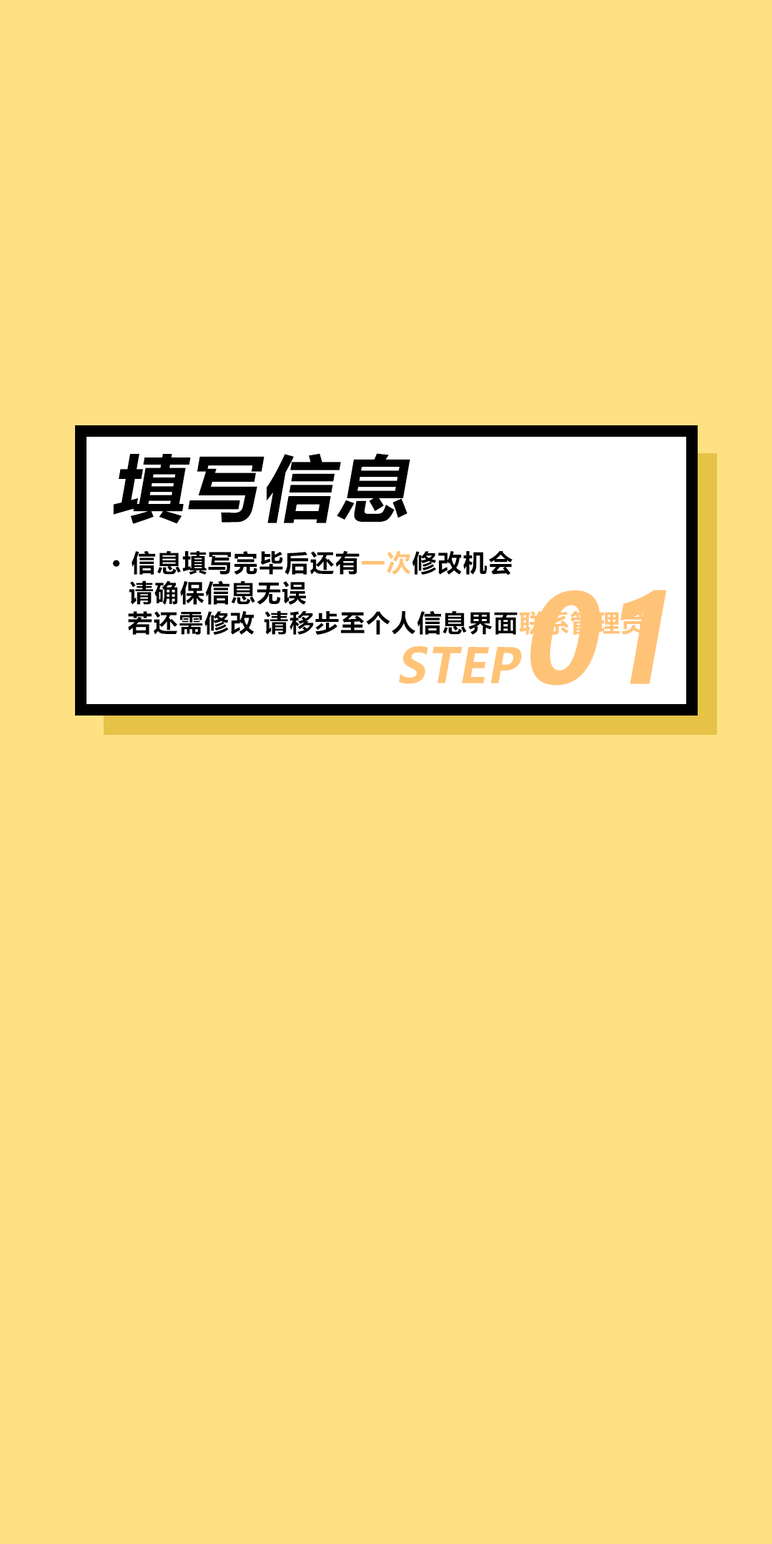
<style>
.page{position:relative;width:772px;height:1544px;background:#fee183}
.page>*{position:absolute;margin:0}
.t1{font:71.6px "MicrosoftYaHei-Bold";letter-spacing:0.05em;color:#000000;font-style:italic}
.t2{font:24.3px/30px "MicrosoftYaHei-Bold";letter-spacing:0.05em;color:#000000}
.t3{font:24.3px/30px "MicrosoftYaHei-Bold";letter-spacing:0.05em;color:#ffc378}
.t4{font:48px "MicrosoftYaHei-Bold";letter-spacing:0.03em;color:#ffc378;font-style:italic}
.t5{font:121.1px "MicrosoftYaHei-Bold";letter-spacing:0.03em;color:#ffc378;font-style:italic}
</style>
<div class="page">
<p class="t1" style="left:113px;top:453px;width:297px;height:71px">填写信息</p>
<p class="t2" style="left:113px;top:551px;width:532px;height:84px">· 信息填写完毕后还有<span class="t3">一次</span>修改机会<br> 请确保信息无误<br>  若还需修改 请移步至个人信息界面<span class="t3">联系管理员</span></p>
<p class="t4" style="left:399px;top:590px;width:267px;height:96px">STEP<span class="t5">01</span></p>
</div>
